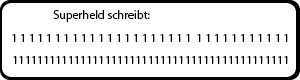
<style>
.page{position:relative;width:300px;height:80px;background:#ffffff}
.page>*{position:absolute;margin:0}
.t1{font:12px "MyriadPro-Regular";color:#000000}
</style>
<div class="page">
<p class="t1" style="left:53px;top:10px;width:97px;height:12px">Superheld schreibt:</p>
<p class="t1" style="left:12px;top:34px;width:276px;height:8px">1 1 1 1 1 1 1 1 1 1 1 1 1 1 1 1 1 1 1 1 1  1 1 1 1 1 1 1 1 1 1 1</p>
<p class="t1" style="left:13px;top:56px;width:275px;height:8px">111111111111111111111111111111111111111111111</p>
</div>
